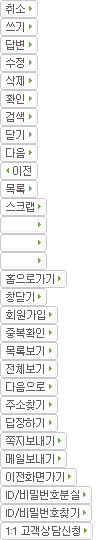
<style>
.page{position:relative;width:100px;height:540px;background:#ffffff}
.page>*{position:absolute;margin:0}
.t1{font:11px "Dotum";letter-spacing:-0.08em;color:#5b5b5b}
.t2{font:11px "Dotum";letter-spacing:-0.025em;color:#5b5b5b}
</style>
<div class="page">
<p class="t1" style="left:6px;top:4px;width:19px;height:10px">취소</p>
<p class="t1" style="left:6px;top:22px;width:18px;height:10px">쓰기</p>
<p class="t1" style="left:6px;top:40px;width:18px;height:10px">답변</p>
<p class="t1" style="left:6px;top:58px;width:18px;height:10px">수정</p>
<p class="t1" style="left:6px;top:76px;width:18px;height:10px">삭제</p>
<p class="t1" style="left:6px;top:94px;width:18px;height:10px">확인</p>
<p class="t1" style="left:6px;top:112px;width:18px;height:10px">검색</p>
<p class="t1" style="left:6px;top:130px;width:18px;height:10px">닫기</p>
<p class="t1" style="left:6px;top:148px;width:19px;height:10px">다음</p>
<p class="t1" style="left:13px;top:166px;width:18px;height:10px">이전</p>
<p class="t1" style="left:6px;top:184px;width:19px;height:10px">목록</p>
<p class="t1" style="left:6px;top:202px;width:28px;height:10px">스크랩</p>
<p class="t1" style="left:6px;top:274px;width:48px;height:10px">홈으로가기</p>
<p class="t1" style="left:6px;top:292px;width:28px;height:10px">창닫기</p>
<p class="t1" style="left:6px;top:310px;width:39px;height:10px">회원가입</p>
<p class="t1" style="left:6px;top:328px;width:38px;height:10px">중복확인</p>
<p class="t1" style="left:6px;top:346px;width:38px;height:10px">목록보기</p>
<p class="t1" style="left:6px;top:364px;width:38px;height:10px">전체보기</p>
<p class="t1" style="left:6px;top:382px;width:39px;height:10px">다음으로</p>
<p class="t1" style="left:6px;top:400px;width:38px;height:10px">주소찾기</p>
<p class="t1" style="left:6px;top:418px;width:38px;height:10px">답장하기</p>
<p class="t1" style="left:6px;top:436px;width:48px;height:10px">쪽지보내기</p>
<p class="t1" style="left:6px;top:454px;width:48px;height:10px">메일보내기</p>
<p class="t1" style="left:6px;top:472px;width:58px;height:10px">이전화면가기</p>
<p class="t1" style="left:6px;top:490px;width:73px;height:10px"><span class="t2">ID/</span>비밀번호분실</p>
<p class="t1" style="left:6px;top:508px;width:73px;height:10px"><span class="t2">ID/</span>비밀번호찾기</p>
<p class="t1" style="left:6px;top:526px;width:74px;height:10px">1:1 고객상담신청</p>
</div>
